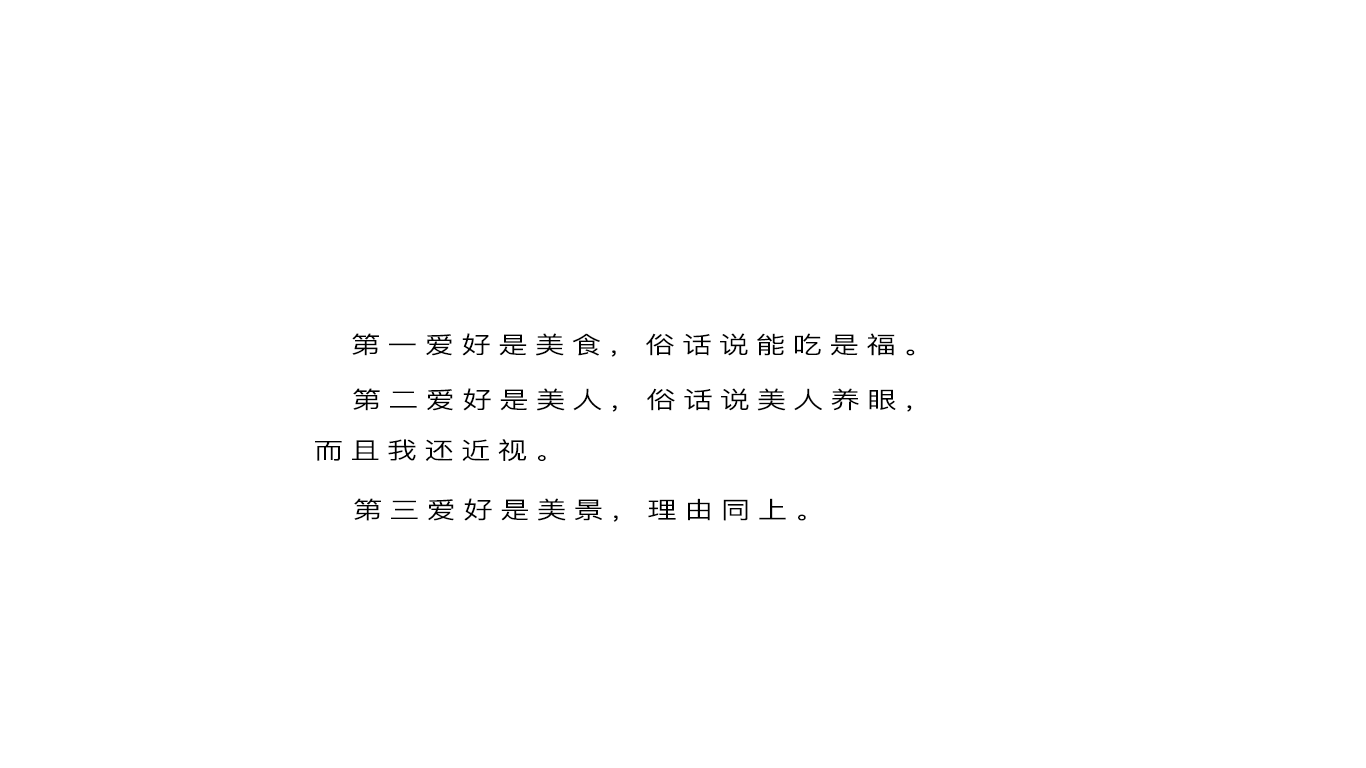
<style>
.page{position:relative;width:1366px;height:768px;background:#ffffff}
.page>*{position:absolute;margin:0}
.t1{font:23.3px "PingFang-SC-Regular";letter-spacing:0.22em;color:#000000;font-weight:bold;scale:1.27 1}
</style>
<div class="page">
<p class="t1" style="left:352px;top:333px;width:563px;height:24px">第一爱好是美食，俗话说能吃是福。</p>
<p class="t1" style="left:353px;top:388px;width:559px;height:24px">第二爱好是美人，俗话说美人养眼，</p>
<p class="t1" style="left:315px;top:439px;width:231px;height:22px">而且我还近视。</p>
<p class="t1" style="left:354px;top:498px;width:452px;height:24px">第三爱好是美景，理由同上。</p>
</div>
